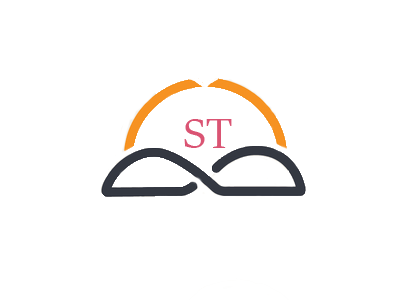
<style>
.page{position:relative;width:400px;height:300px;background:#ffffff}
.page>*{position:absolute;margin:0}
.t1{font:48px "SitkaBanner";color:#da5473}
</style>
<div class="page">
<p class="t1" style="left:184px;top:119px;width:48px;height:29px">ST</p>
</div>
